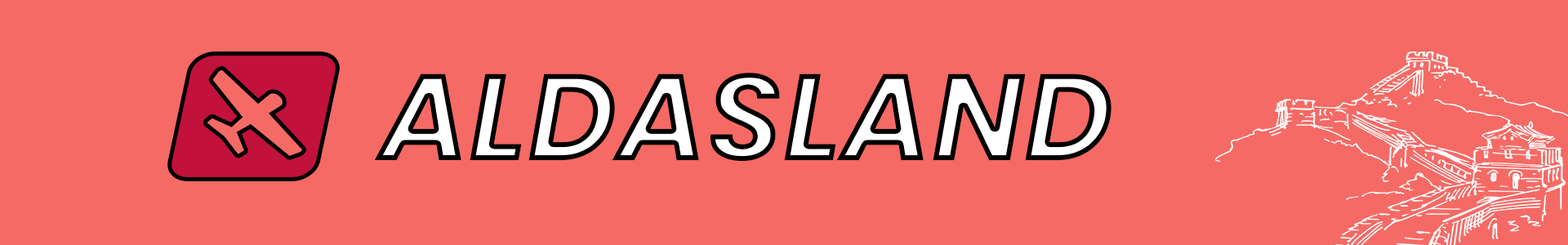
<style>
.page{position:relative;width:1568px;height:245px;background:#f56a65}
.page>*{position:absolute;margin:0}
.t1{font:122.5px "Poppins-BoldItalic"}
</style>
<div class="page">
<p class="t1" style="left:374px;top:73px;width:737px;height:89px">ALDASLAND</p>
</div>
